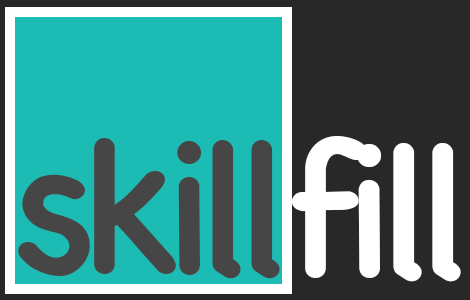
<style>
.page{position:relative;width:470px;height:300px;background:#1cbbb4}
.page>*{position:absolute;margin:0}
.t1{font:190px "ChalkboardSE-Regular";letter-spacing:-0.08em;color:#ffffff}
.t2{font:190px "ChalkboardSE-Regular";letter-spacing:-0.08em;color:#464646}
</style>
<div class="page">
<p class="t1" style="left:291px;top:136px;width:170px;height:146px">fill</p>
<p class="t2" style="left:18px;top:138px;width:262px;height:141px">skill</p>
</div>
